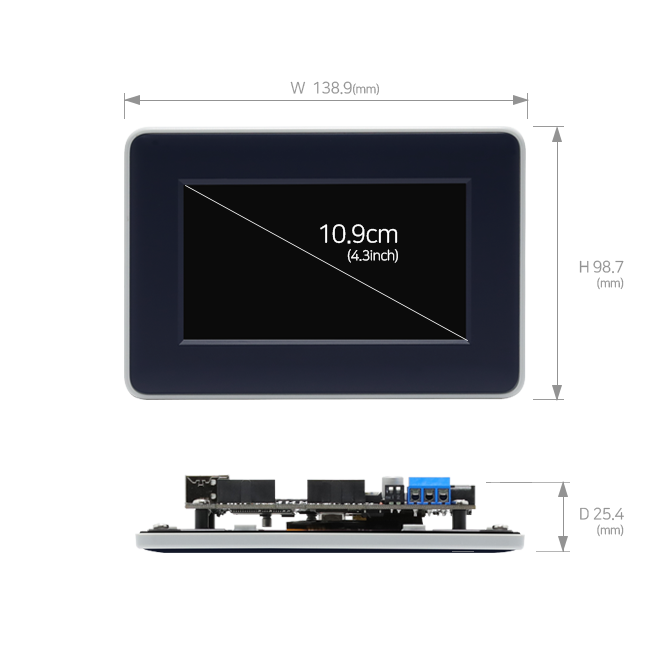
<style>
.page{position:relative;width:650px;height:650px;background:#ffffff}
.page>*{position:absolute;margin:0}
.t1{font:16px "NanumSquareR";letter-spacing:-0.03em;color:#939393}
.t2{font:12px "NanumSquareR";letter-spacing:-0.03em;color:#939393}
.t3{font:14px/18px "NanumSquareR";letter-spacing:-0.03em;color:#ffffff}
.t4{font:25px/18px "NanumSquareR";letter-spacing:-0.03em;color:#ffffff}
.t5{font:16px/15px "NanumSquareR";letter-spacing:-0.03em;color:#939393}
.t6{font:12px/15px "NanumSquareR";letter-spacing:-0.03em;color:#939393}
</style>
<div class="page">
<p class="t1" style="left:290px;top:81px;width:89px;height:15px">W  138.9<span class="t2">(mm)</span></p>
<p class="t3" style="left:320px;top:224px;width:78px;height:39px;text-align:right"><span class="t4">10.9cm<br></span>(4.3inch)</p>
<p class="t5" style="left:579px;top:260px;width:45px;height:30px;text-align:right">H 98.7<br><span class="t6">(mm)</span></p>
<p class="t5" style="left:580px;top:507px;width:44px;height:30px;text-align:right">D 25.4<br><span class="t6">(mm)</span></p>
</div>
